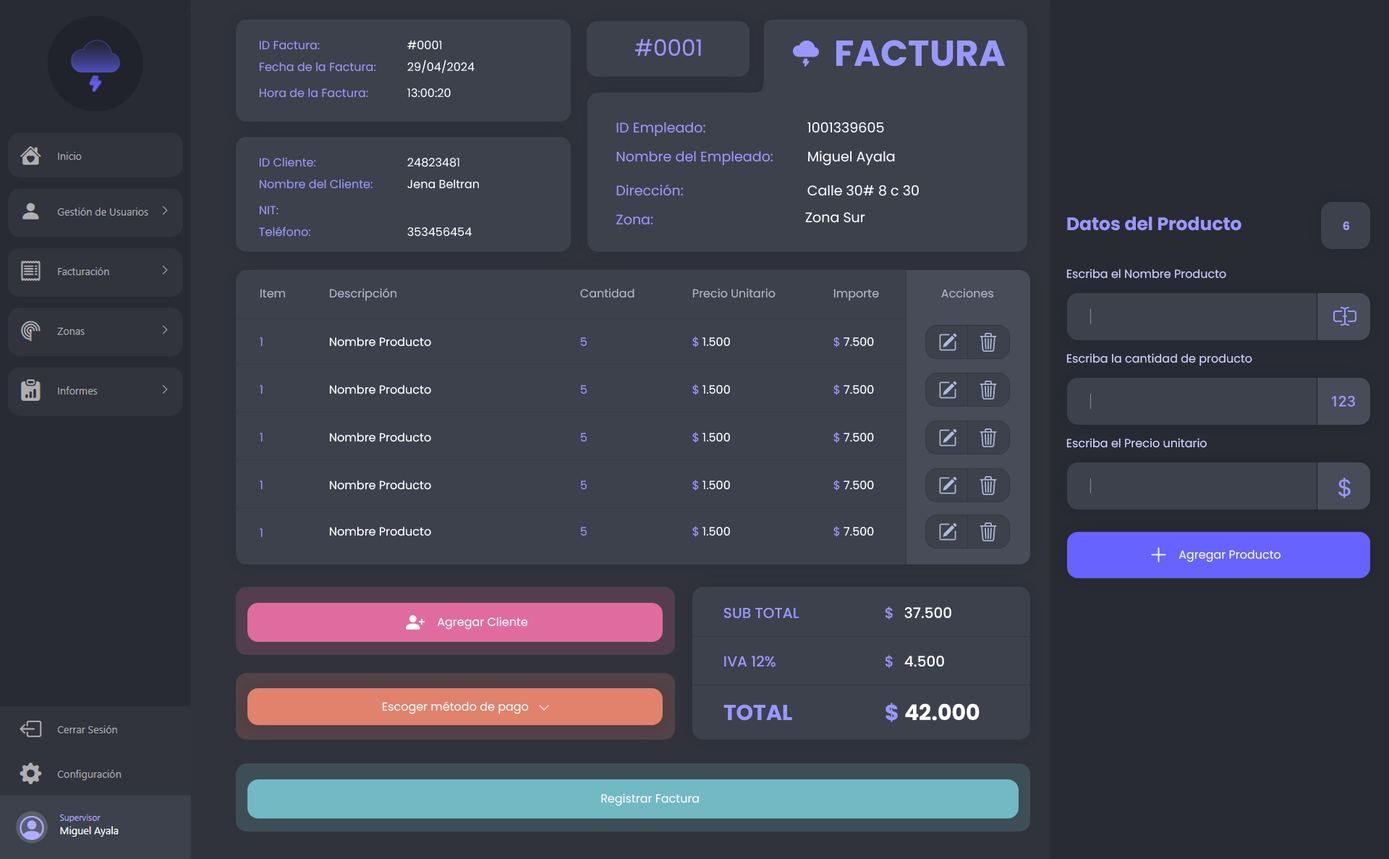
<style>
.page{position:relative;width:1389px;height:859px;background:#3d414c}
.page>*{position:absolute;margin:0}
.t1{font:11.6px "Poppins-Regular";color:#9a98ff}
.t2{font:11.6px "Poppins-Regular";color:#ffffff}
.t3{font:22.4px "Poppins-Regular";color:#9a98ff}
.t4{font:36.2px "Poppins-Bold";color:#9a98ff}
.t5{font:13.8px "Poppins-Regular";color:#9a98ff}
.t6{font:13.8px "Poppins-Regular";color:#ffffff}
.t7{font:18.1px "Poppins-Bold";color:#9a98ff}
.t8{font:11.6px "Poppins-Bold";color:#9a98ff}
.t9{font:11.6px "Poppins-Regular";color:#cecdff}
.t10{font:11.6px "Poppins-Regular";color:#aeb5c8}
.t11{font:11.6px "Poppins-Regular";color:#cfceff}
.t12{font:14.5px "Poppins-Medium";color:#9a98ff}
.t13{font:14.5px "Poppins-Medium";color:#ffffff}
.t14{font:21.7px "Poppins-Bold";color:#9a98ff}
.t15{font:21.7px "Poppins-Bold";color:#ffffff}
</style>
<div class="page">
<p class="t1" style="left:259px;top:41px;width:61px;height:9px">ID Factura:</p>
<p class="t2" style="left:407px;top:41px;width:35px;height:9px">#0001</p>
<p class="t3" style="left:635px;top:39px;width:66px;height:17px">#0001</p>
<p class="t4" style="left:836px;top:40px;width:169px;height:27px">FACTURA</p>
<p class="t1" style="left:259px;top:62px;width:116px;height:10px">Fecha de la Factura:</p>
<p class="t2" style="left:407px;top:60px;width:68px;height:13px">29/04/2024</p>
<p class="t1" style="left:259px;top:88px;width:109px;height:10px">Hora de la Factura:</p>
<p class="t2" style="left:407px;top:88px;width:44px;height:10px">13:00:20</p>
<p class="t5" style="left:616px;top:122px;width:89px;height:15px">ID Empleado:</p>
<p class="t6" style="left:807px;top:122px;width:77px;height:11px">1001339605</p>
<p class="t1" style="left:259px;top:157px;width:57px;height:10px">ID Cliente:</p>
<p class="t2" style="left:407px;top:158px;width:52px;height:9px">24823481</p>
<p class="t5" style="left:616px;top:150px;width:157px;height:16px">Nombre del Empleado:</p>
<p class="t6" style="left:808px;top:150px;width:87px;height:16px">Miguel Ayala</p>
<p class="t1" style="left:259px;top:179px;width:114px;height:10px">Nombre del Cliente:</p>
<p class="t2" style="left:407px;top:179px;width:72px;height:10px">Jena Beltran</p>
<p class="t5" style="left:616px;top:184px;width:67px;height:12px">Dirección:</p>
<p class="t6" style="left:807px;top:184px;width:112px;height:12px">Calle 30# 8 c 30</p>
<p class="t1" style="left:259px;top:205px;width:19px;height:10px">NIT:</p>
<p class="t5" style="left:616px;top:214px;width:37px;height:11px">Zona:</p>
<p class="t6" style="left:805px;top:212px;width:60px;height:11px">Zona Sur</p>
<p class="t7" style="left:1067px;top:216px;width:174px;height:15px">Datos del Producto</p>
<p class="t8" style="left:1343px;top:221px;width:6px;height:9px">6</p>
<p class="t1" style="left:259px;top:226px;width:51px;height:11px">Teléfono:</p>
<p class="t2" style="left:407px;top:227px;width:65px;height:10px">353456454</p>
<p class="t9" style="left:1066px;top:268px;width:160px;height:10px">Escriba el Nombre Producto</p>
<p class="t10" style="left:260px;top:289px;width:25px;height:9px">Item</p>
<p class="t10" style="left:329px;top:288px;width:67px;height:13px">Descripción</p>
<p class="t10" style="left:580px;top:288px;width:54px;height:10px">Cantidad</p>
<p class="t10" style="left:692px;top:288px;width:83px;height:10px">Precio Unitario</p>
<p class="t10" style="left:833px;top:289px;width:46px;height:12px">Importe</p>
<p class="t10" style="left:941px;top:288px;width:53px;height:10px">Acciones</p>
<p class="t1" style="left:260px;top:337px;width:3px;height:9px">1</p>
<p class="t2" style="left:329px;top:337px;width:102px;height:9px">Nombre Producto</p>
<p class="t1" style="left:581px;top:337px;width:6px;height:9px">5</p>
<p class="t2" style="left:692px;top:336px;width:38px;height:11px"><span class="t1">$</span> 1.500</p>
<p class="t2" style="left:833px;top:336px;width:41px;height:11px"><span class="t1">$ </span>7.500</p>
<p class="t11" style="left:1066px;top:353px;width:186px;height:13px">Escriba la cantidad de producto</p>
<p class="t1" style="left:260px;top:385px;width:3px;height:9px">1</p>
<p class="t2" style="left:329px;top:385px;width:102px;height:9px">Nombre Producto</p>
<p class="t1" style="left:581px;top:385px;width:6px;height:9px">5</p>
<p class="t2" style="left:692px;top:384px;width:38px;height:11px"><span class="t1">$</span> 1.500</p>
<p class="t2" style="left:833px;top:384px;width:41px;height:11px"><span class="t1">$ </span>7.500</p>
<p class="t1" style="left:260px;top:433px;width:3px;height:9px">1</p>
<p class="t2" style="left:329px;top:433px;width:102px;height:9px">Nombre Producto</p>
<p class="t1" style="left:581px;top:433px;width:6px;height:9px">5</p>
<p class="t2" style="left:692px;top:432px;width:38px;height:11px"><span class="t1">$</span> 1.500</p>
<p class="t2" style="left:833px;top:432px;width:41px;height:11px"><span class="t1">$ </span>7.500</p>
<p class="t11" style="left:1066px;top:438px;width:141px;height:10px">Escriba el Precio unitario</p>
<p class="t1" style="left:260px;top:480px;width:3px;height:10px">1</p>
<p class="t2" style="left:329px;top:480px;width:102px;height:10px">Nombre Producto</p>
<p class="t1" style="left:581px;top:480px;width:6px;height:10px">5</p>
<p class="t2" style="left:692px;top:480px;width:38px;height:10px"><span class="t1">$</span> 1.500</p>
<p class="t2" style="left:833px;top:480px;width:41px;height:10px"><span class="t1">$ </span>7.500</p>
<p class="t1" style="left:260px;top:528px;width:3px;height:9px">1</p>
<p class="t2" style="left:329px;top:527px;width:102px;height:9px">Nombre Producto</p>
<p class="t1" style="left:581px;top:527px;width:6px;height:9px">5</p>
<p class="t2" style="left:692px;top:526px;width:38px;height:11px"><span class="t1">$</span> 1.500</p>
<p class="t2" style="left:833px;top:526px;width:41px;height:11px"><span class="t1">$ </span>7.500</p>
<p class="t2" style="left:1178px;top:550px;width:103px;height:12px">Agregar Producto</p>
<p class="t2" style="left:437px;top:616px;width:91px;height:13px">Agregar Cliente</p>
<p class="t12" style="left:724px;top:608px;width:75px;height:10px">SUB TOTAL</p>
<p class="t12" style="left:885px;top:606px;width:8px;height:13px">$</p>
<p class="t13" style="left:904px;top:607px;width:47px;height:11px">37.500</p>
<p class="t12" style="left:724px;top:655px;width:51px;height:12px">IVA 12%</p>
<p class="t12" style="left:885px;top:655px;width:8px;height:13px">$</p>
<p class="t13" style="left:904px;top:655px;width:40px;height:12px">4.500</p>
<p class="t2" style="left:382px;top:701px;width:147px;height:13px">Escoger método de pago</p>
<p class="t14" style="left:723px;top:704px;width:69px;height:16px">TOTAL</p>
<p class="t14" style="left:885px;top:702px;width:13px;height:20px">$</p>
<p class="t15" style="left:905px;top:703px;width:74px;height:17px">42.000</p>
<p class="t2" style="left:601px;top:793px;width:98px;height:13px">Registrar Factura</p>
</div>
